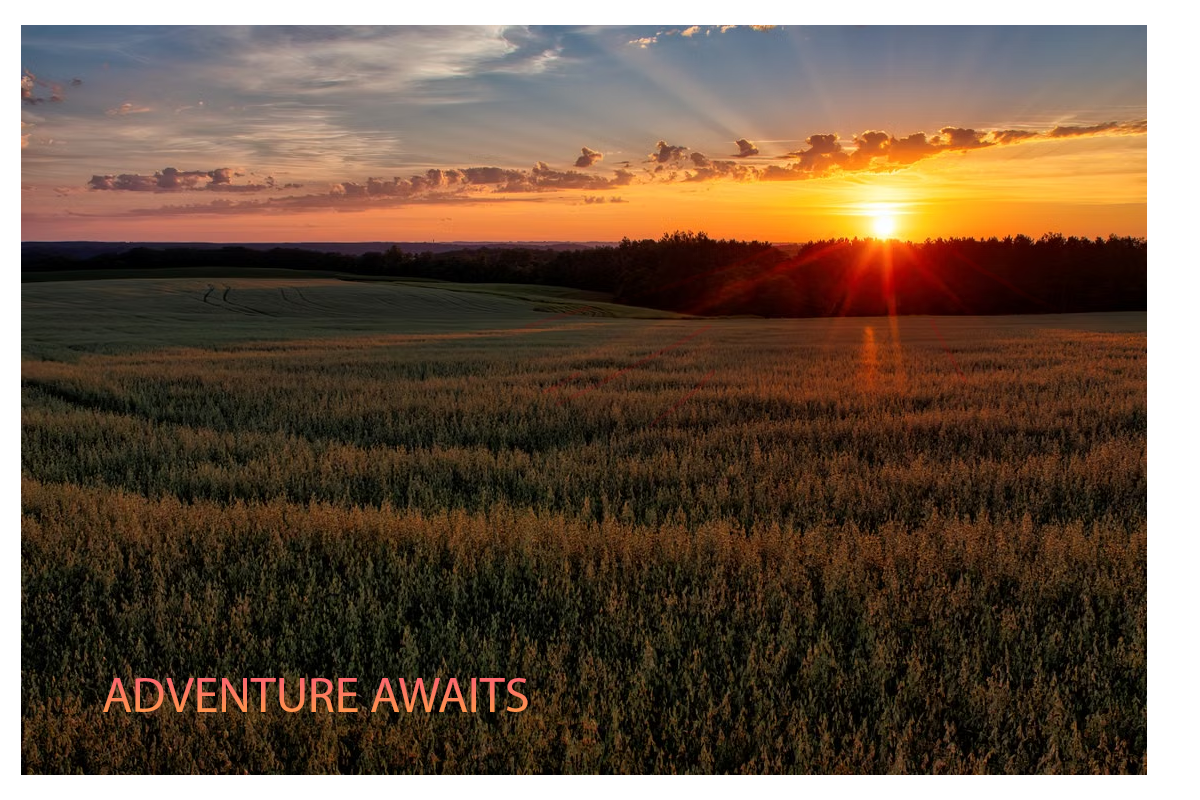
<style>
.page{position:relative;width:1200px;height:800px}
.page>*{position:absolute;margin:0}
.t1{font:50px "MyriadPro-Regular";color:#fd7c5f}
</style>
<div class="page">
<p class="t1" style="left:103px;top:678px;width:425px;height:34px">ADVENTURE AWAITS</p>
</div>
